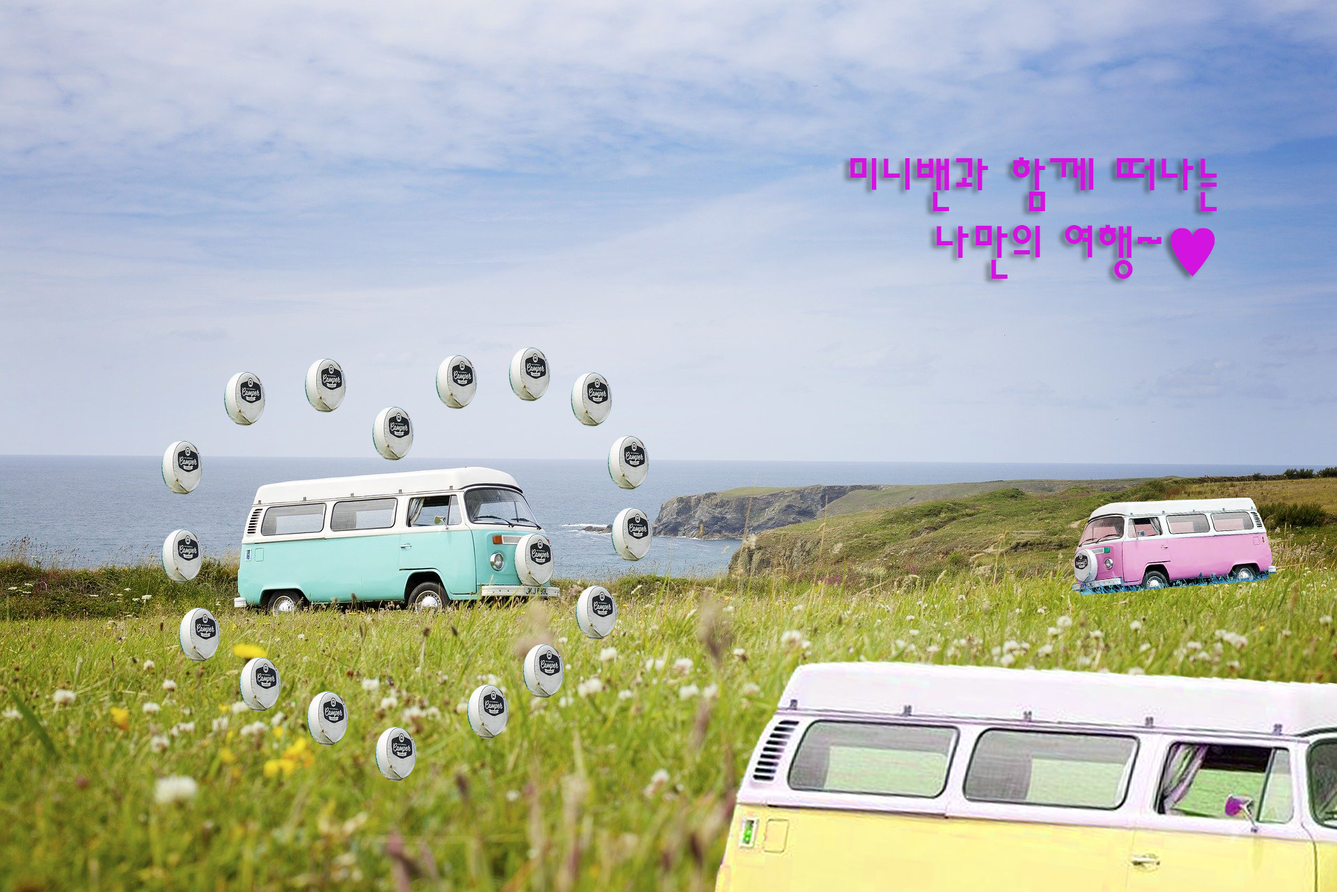
<style>
.page{position:relative;width:1337px;height:892px}
.page>*{position:absolute;margin:0}
.t1{font:56.4px "H2sa1M";color:#d313df}
</style>
<div class="page">
<p class="t1" style="left:851px;top:157px;width:367px;height:122px;text-align:right">미니밴과 함께 떠나는<br>나만의 여행~♥</p>
</div>
